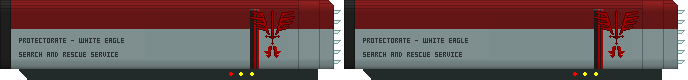
<style>
.page{position:relative;width:688px;height:80px}
.page>*{position:absolute;margin:0}
.t1{font:8px "Small-5x3";color:#303030}
</style>
<div class="page">
<p class="t1" style="left:19px;top:38px;width:105px;height:19px">PROTECTORATE - WHITE EAGLE<br>SEARCH AND RESCUE SERVICE</p>
</div>
